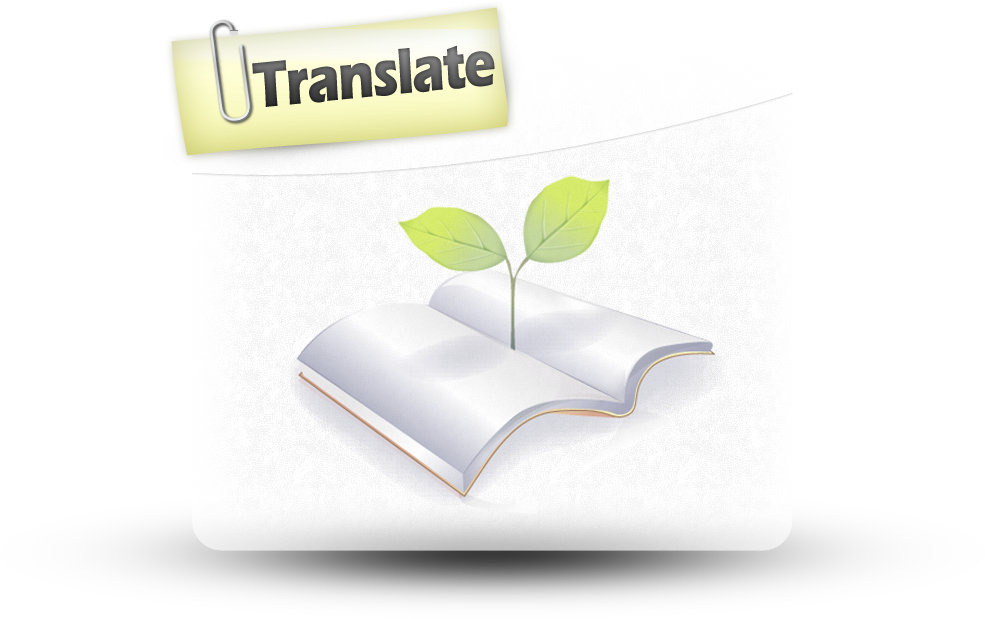
<style>
.page{position:relative;width:985px;height:619px;background:#ffffff}
.page>*{position:absolute;margin:0}
.t1{font:66.3px "ErasITC-Bold";letter-spacing:-0.05em;color:#4c4c4c;font-weight:bold;scale:0.8 1}
</style>
<div class="page">
<p class="t1" style="left:252px;top:45px;width:243px;height:62px;rotate:-6deg">Translate</p>
</div>
